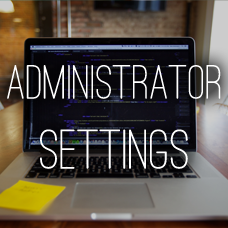
<style>
.page{position:relative;width:228px;height:228px}
.page>*{position:absolute;margin:0}
.t1{font:50px "OstrichSansRounded-Medium";color:#ffffff}
.t2{font:58.3px "OstrichSansRounded-Medium";color:#ffffff}
</style>
<div class="page">
<p class="t1" style="left:7px;top:65px;width:214px;height:104px;text-align:center">Administrator<br><span class="t2">Settings</span></p>
</div>
